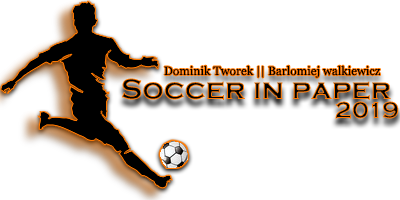
<style>
.page{position:relative;width:400px;height:200px;background:#ffffff}
.page>*{position:absolute;margin:0}
.t1{font:12px "Georgia";color:#000000}
.t2{font:30px "CopperplateGothic-Bold"}
.t3{font:24px "CopperplateGothic-Bold"}
</style>
<div class="page">
<p class="t1" style="left:164px;top:65px;width:216px;height:13px">Dominik Tworek || Barlomiej walkiewicz</p>
<p class="t2" style="left:121px;top:78px;width:270px;height:22px">Soccer in paper</p>
<p class="t3" style="left:335px;top:101px;width:64px;height:18px">2019</p>
</div>
